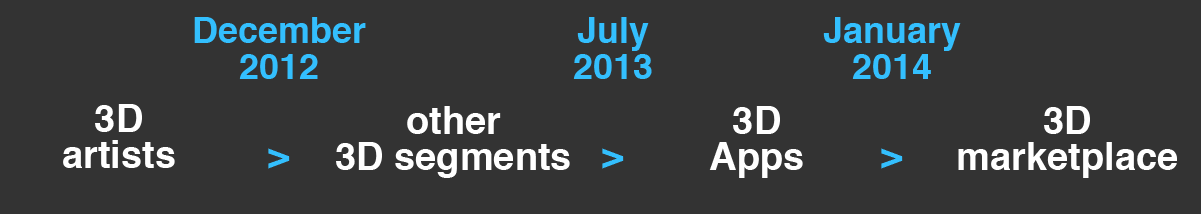
<style>
.page{position:relative;width:1201px;height:214px;background:#333333}
.page>*{position:absolute;margin:0}
.t1{font:36px/36px "Helvetica-Bold";color:#33bffe}
.t2{font:36px/30px "Helvetica-Bold";color:#33bffe}
.t3{font:38px/36px "Helvetica-Bold";color:#ffffff}
</style>
<div class="page">
<p class="t1" style="left:194px;top:17px;width:172px;height:152px;text-align:center">December<br>2012<br><br><br><span class="t2">&gt;</span></p>
<p class="t1" style="left:573px;top:17px;width:79px;height:152px;text-align:center">July<br>2013<br><br><br><span class="t2">&gt;</span></p>
<p class="t1" style="left:823px;top:17px;width:138px;height:152px;text-align:center">January<br>2014<br><br><br><span class="t2">&gt;</span></p>
<p class="t3" style="left:63px;top:104px;width:112px;height:64px;text-align:center">3D<br>artists</p>
<p class="t3" style="left:336px;top:106px;width:234px;height:72px;text-align:center">other<br>3D segments</p>
<p class="t3" style="left:709px;top:106px;width:94px;height:72px;text-align:center">3D<br>Apps</p>
<p class="t3" style="left:958px;top:106px;width:219px;height:72px;text-align:center">3D<br>marketplace</p>
</div>
